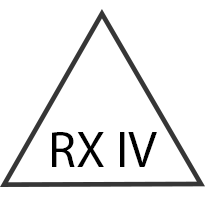
<style>
.page{position:relative;width:205px;height:206px;background:#ffffff}
.page>*{position:absolute;margin:0}
.t1{font:51.5px "MyriadPro-Regular";color:#000000}
</style>
<div class="page">
<p class="t1" style="left:52px;top:132px;width:105px;height:35px">RX IV</p>
</div>
